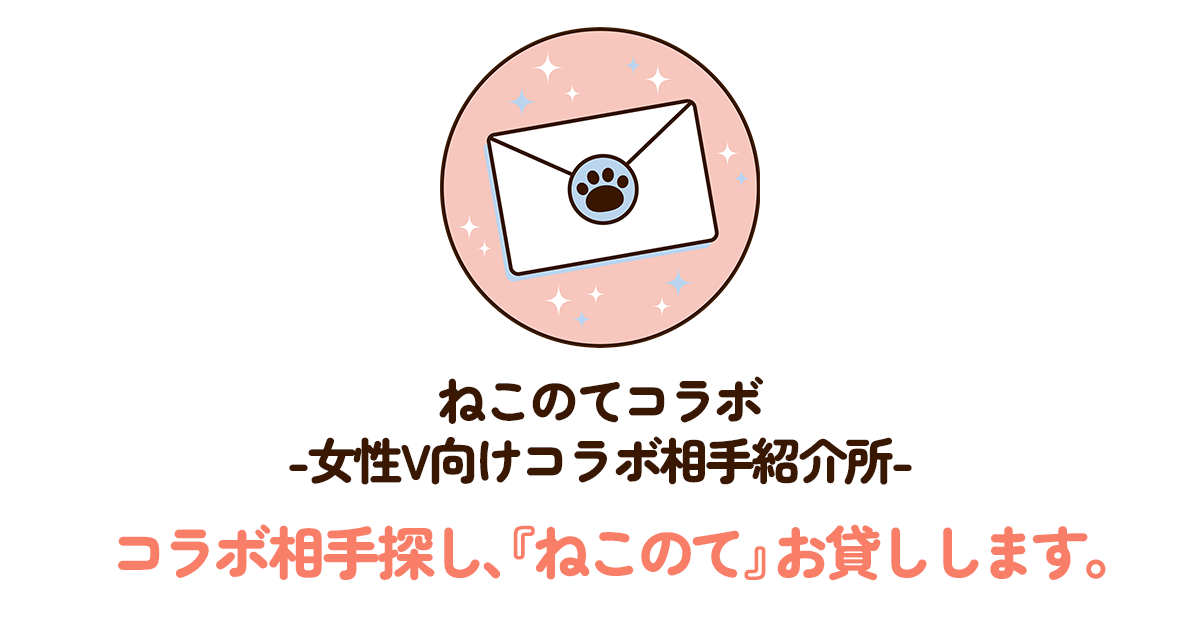
<style>
.page{position:relative;width:1200px;height:630px;background:#ffffff}
.page>*{position:absolute;margin:0}
.t1{font:12px "ZenMaruGothic-Black";letter-spacing:-0.075em;color:#391701}
.t2{font:58.3px "ZenMaruGothic-Black";letter-spacing:-0.115em;color:#f87e68}
.t3{font:58.3px "ZenMaruGothic-Black";letter-spacing:-0.135em;color:#f87e68}
</style>
<div class="page">
<p class="t1" style="left:289px;top:376px;width:623px;height:109px;text-align:center">ねこのてコラボ <br>-女性V向けコラボ相手紹介所-</p>
<p class="t2" style="left:118px;top:524px;width:988px;height:57px"><span class="t3">　</span>コラボ相手探し、『ねこのて』お貸しします。</p>
</div>
